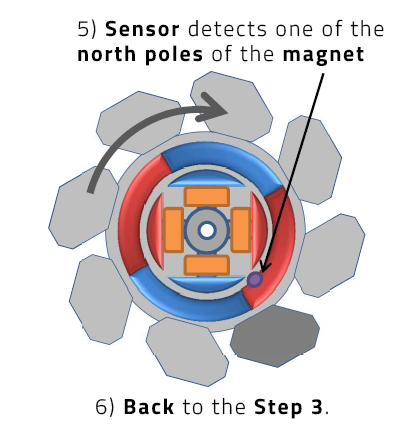
<style>
.page{position:relative;width:395px;height:430px;background:#ffffff}
.page>*{position:absolute;margin:0}
.t1{font:22px/25px "TitilliumWeb-Light";letter-spacing:0.08em;color:#000000}
.t2{font:22px/25px "TitilliumWeb-Bold";letter-spacing:0.08em;color:#000000}
.t3{font:22px "TitilliumWeb-Light";letter-spacing:0.08em;color:#000000}
.t4{font:22px "TitilliumWeb-Bold";letter-spacing:0.08em;color:#000000}
</style>
<div class="page">
<p class="t1" style="left:78px;top:19px;width:306px;height:47px">5) <span class="t2">Sensor </span>detects one of the <br><span class="t2">north poles </span>of the <span class="t2">magnet</span></p>
<p class="t3" style="left:96px;top:397px;width:232px;height:22px">6) <span class="t4">Back </span>to the <span class="t4">Step 3</span>.</p>
</div>
